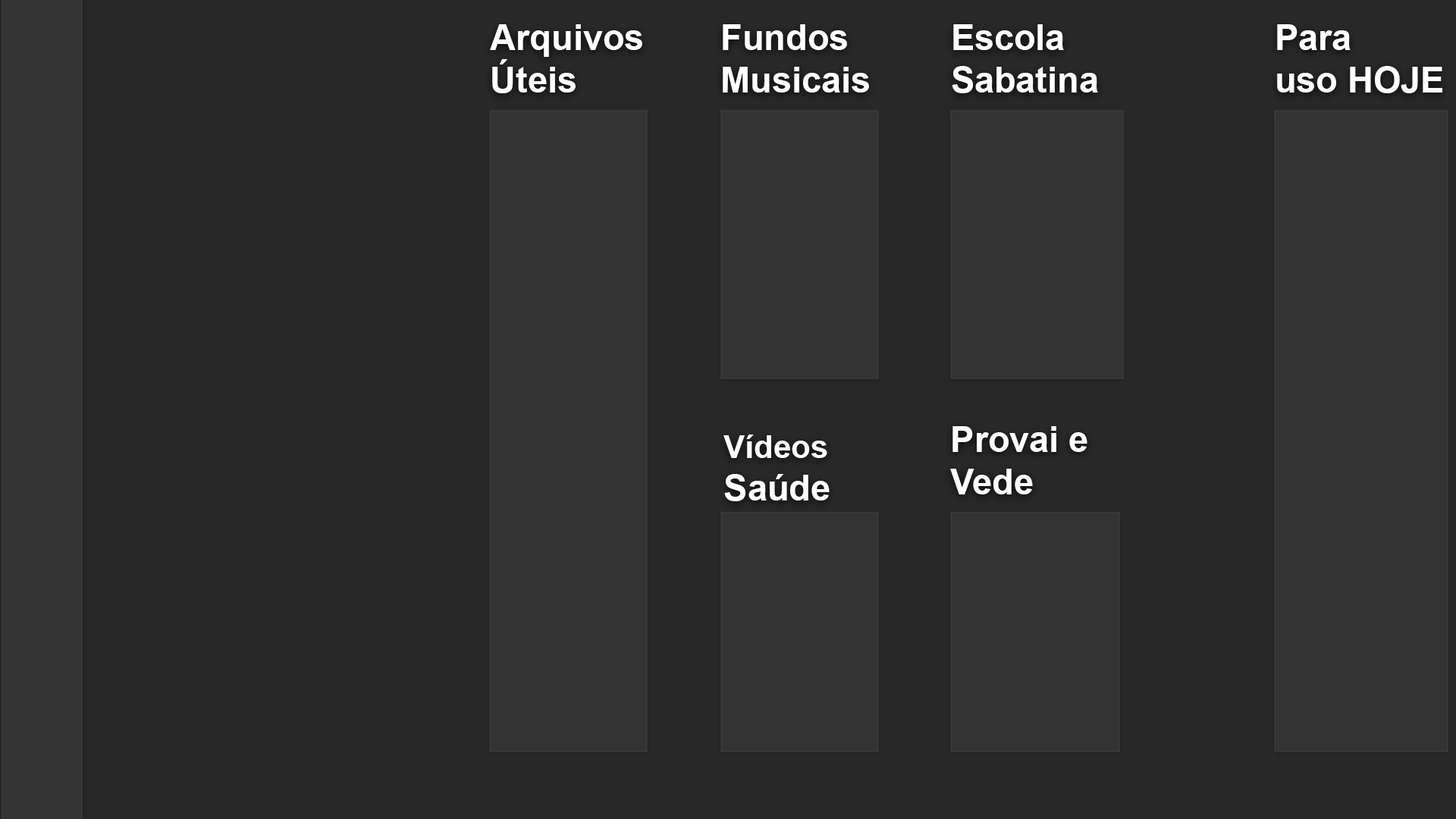
<style>
.page{position:relative;width:1456px;height:819px;background:#282828}
.page>*{position:absolute;margin:0}
.t1{font:35.5px "Arial-BoldMT";color:#ffffff}
.t2{font:31.8px "Arial-BoldMT";color:#ffffff}
</style>
<div class="page">
<p class="t1" style="left:490px;top:24px;width:152px;height:69px">Arquivos<br>Úteis</p>
<p class="t1" style="left:723px;top:24px;width:146px;height:69px">Fundos<br>Musicais</p>
<p class="t1" style="left:952px;top:24px;width:146px;height:69px">Escola<br>Sabatina</p>
<p class="t1" style="left:1277px;top:24px;width:165px;height:69px">Para<br>uso HOJE</p>
<p class="t2" style="left:723px;top:435px;width:107px;height:66px">Vídeos<br><span class="t1">Saúde</span></p>
<p class="t1" style="left:950px;top:426px;width:137px;height:68px">Provai e<br>Vede</p>
</div>
